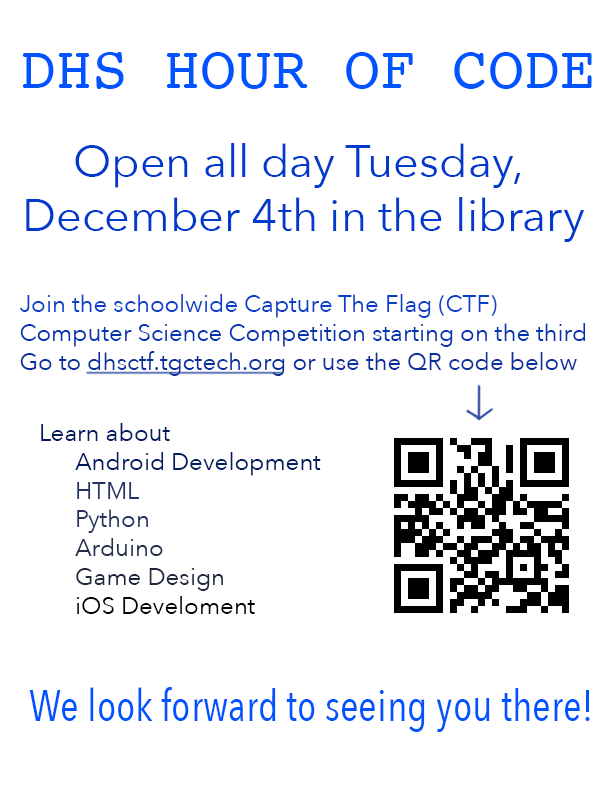
<style>
.page{position:relative;width:612px;height:792px;background:#ffffff}
.page>*{position:absolute;margin:0}
.t1{font:60px "Courier";color:#0054ff}
.t2{font:45px "AvenirNext-Regular";color:#003acd}
.t3{font:24px "AvenirNext-Regular";color:#0133b3}
.t4{font:24px "AvenirNext-Regular";color:#073fcb}
.t5{font:24px "AvenirNext-Regular";color:#07309a}
.t6{font:24px "AvenirNext-Regular";color:#001b60}
.t7{font:24px "AvenirNext-Regular";color:#243365}
.t8{font:24px "AvenirNext-Regular";color:#233161}
.t9{font:24px "AvenirNext-Regular";color:#222c4e}
.t10{font:24px "AvenirNext-Regular";color:#1e263f}
.t11{font:24px "AvenirNext-Regular";color:#000000}
.t12{font:44px "AvenirNextCondensed-Regular";color:#0054ff}
</style>
<div class="page">
<p class="t1" style="left:22px;top:52px;width:570px;height:37px">DHS HOUR OF CODE</p>
<p class="t2" style="left:26px;top:143px;width:559px;height:99px;text-align:center">Open all day Tuesday, <br>December 4th in the library</p>
<p class="t3" style="left:20px;top:294px;width:566px;height:82px"><span class="t4">Join the schoolwide Capture The Flag (CTF)<br></span>Computer Science Competition starting on the third<br><span class="t5">Go to dhsctf.tgctech.org or use the QR code below</span></p>
<p class="t6" style="left:41px;top:423px;width:280px;height:191px">Learn about <br> Android Development <br> <span class="t7">HTML <br></span><span class="t8"> Python <br> </span><span class="t9">Arduino<br></span><span class="t10"> Game Design<br></span><span class="t11"> iOS Develoment</span></p>
<p class="t12" style="left:29px;top:687px;width:561px;height:45px">We look forward to seeing you there!</p>
</div>
